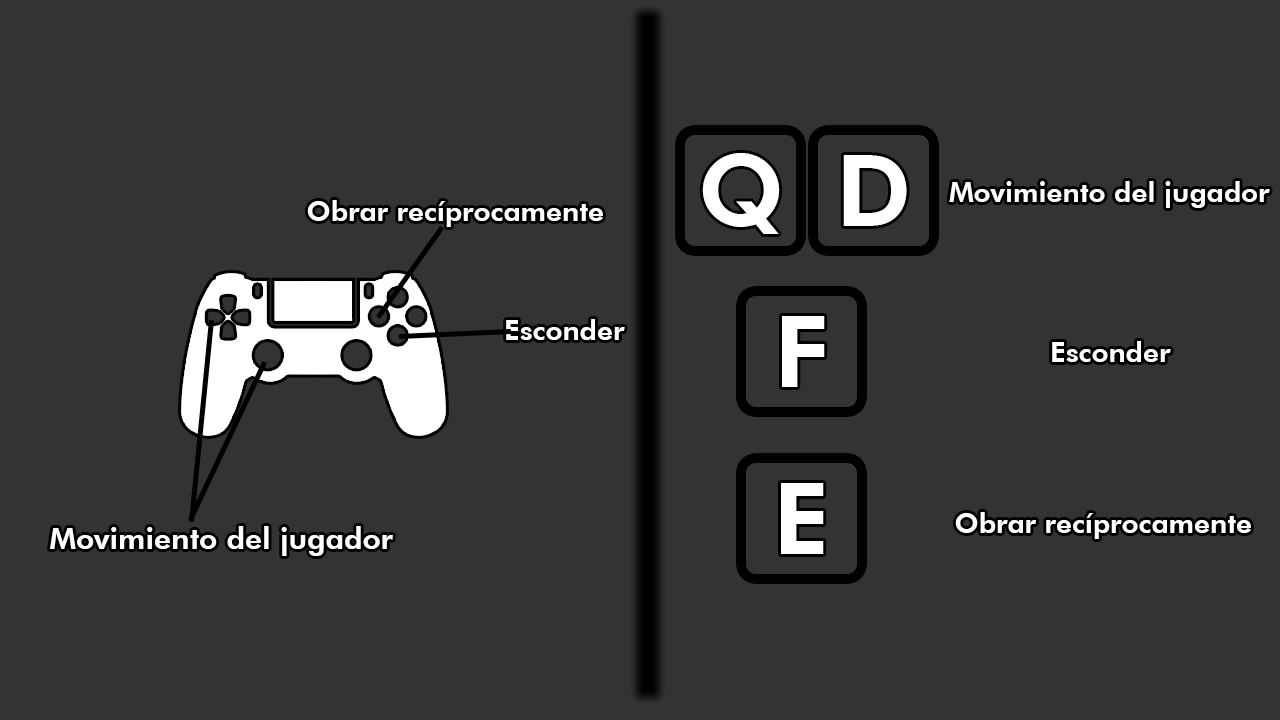
<style>
.page{position:relative;width:1280px;height:720px;background:#333333}
.page>*{position:absolute;margin:0}
.t1{font:100px "FuturaBT-Heavy";color:#ffffff}
.t2{font:28px "FuturaBT-Heavy";color:#ffffff}
.t3{font:30px "FuturaBT-Heavy";color:#ffffff}
</style>
<div class="page">
<p class="t1" style="left:702px;top:153px;width:78px;height:81px">Q</p>
<p class="t1" style="left:843px;top:155px;width:64px;height:71px">D</p>
<p class="t2" style="left:949px;top:181px;width:321px;height:27px">Movimiento del jugador</p>
<p class="t2" style="left:307px;top:200px;width:296px;height:27px">Obrar recíprocamente</p>
<p class="t1" style="left:782px;top:316px;width:43px;height:71px">F</p>
<p class="t2" style="left:506px;top:319px;width:119px;height:21px">Esconder</p>
<p class="t2" style="left:1052px;top:341px;width:119px;height:21px">Esconder</p>
<p class="t1" style="left:781px;top:483px;width:43px;height:71px">E</p>
<p class="t2" style="left:955px;top:512px;width:296px;height:27px">Obrar recíprocamente</p>
<p class="t3" style="left:50px;top:526px;width:343px;height:30px">Movimiento del jugador</p>
</div>
